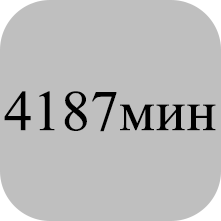
<style>
.page{position:relative;width:221px;height:221px;background:#bfbfbf}
.page>*{position:absolute;margin:0}
.t1{font:57.5px "TimesNewRomanPSMT";color:#000000}
</style>
<div class="page">
<p class="t1" style="left:4px;top:91px;width:212px;height:41px">4187мин</p>
</div>
